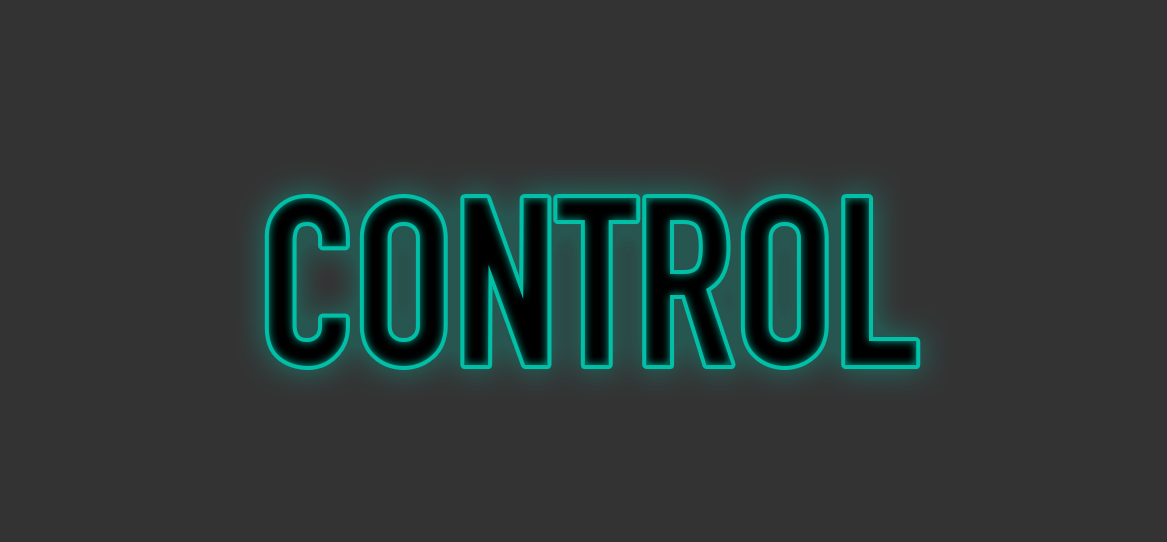
<style>
.page{position:relative;width:1167px;height:542px;background:#333333}
.page>*{position:absolute;margin:0}
.t1{font:233.7px "DINEngschrift";color:#000d0b;text-transform:uppercase}
</style>
<div class="page">
<p class="t1" style="left:268px;top:198px;width:649px;height:168px">control</p>
</div>
